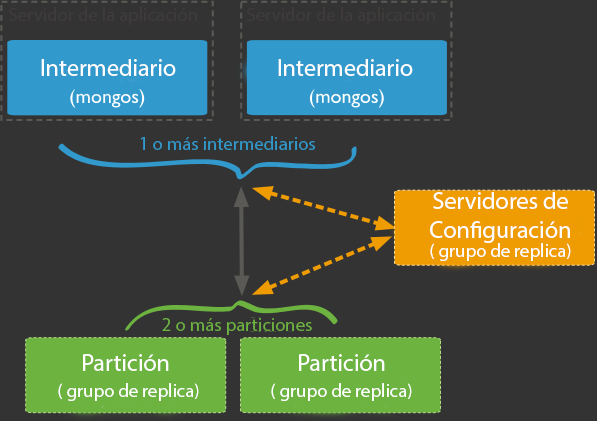
<style>
.page{position:relative;width:597px;height:421px;background:#333333}
.page>*{position:absolute;margin:0}
.t1{font:18.7px "MyriadPro-Regular";color:#3f3b3b}
.t2{font:24px "MyriadPro-Regular";color:#ffffff}
.t3{font:18.7px "MyriadPro-Regular";color:#3299cc}
.t4{font:18.7px "MyriadPro-Regular";color:#ffffff}
.t5{font:18.7px "MyriadPro-Regular";color:#6cb340}
</style>
<div class="page">
<p class="t1" style="left:9px;top:7px;width:188px;height:18px">Servidor de la aplicación</p>
<p class="t1" style="left:247px;top:7px;width:188px;height:18px">Servidor de la aplicación</p>
<p class="t2" style="left:41px;top:59px;width:135px;height:17px">Intermediario</p>
<p class="t2" style="left:278px;top:59px;width:135px;height:17px">Intermediario</p>
<p class="t3" style="left:140px;top:136px;width:175px;height:14px">1 o más intermediarios</p>
<p class="t2" style="left:430px;top:192px;width:140px;height:51px;text-align:center">Servidores de<br>Configuración</p>
<p class="t4" style="left:430px;top:243px;width:141px;height:18px">( grupo de replica)</p>
<p class="t5" style="left:162px;top:318px;width:150px;height:17px">2 o más particiones</p>
<p class="t2" style="left:83px;top:354px;width:86px;height:17px">Partición</p>
<p class="t2" style="left:299px;top:354px;width:86px;height:17px">Partición</p>
<p class="t4" style="left:58px;top:383px;width:141px;height:18px">( grupo de replica)</p>
<p class="t4" style="left:271px;top:383px;width:141px;height:18px">( grupo de replica)</p>
</div>
